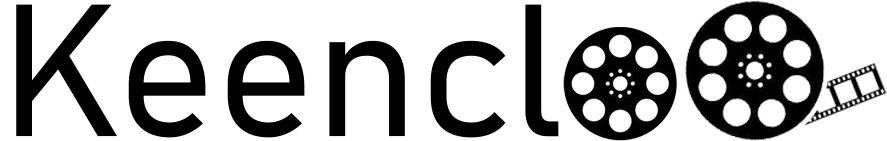
<style>
.page{position:relative;width:887px;height:141px;background:#ffffff}
.page>*{position:absolute;margin:0}
.t1{font:185.3px "Bahnschrift-SemiLight";color:#000000}
</style>
<div class="page">
<p class="t1" style="left:16px;top:4px;width:543px;height:134px">Keencl</p>
</div>
